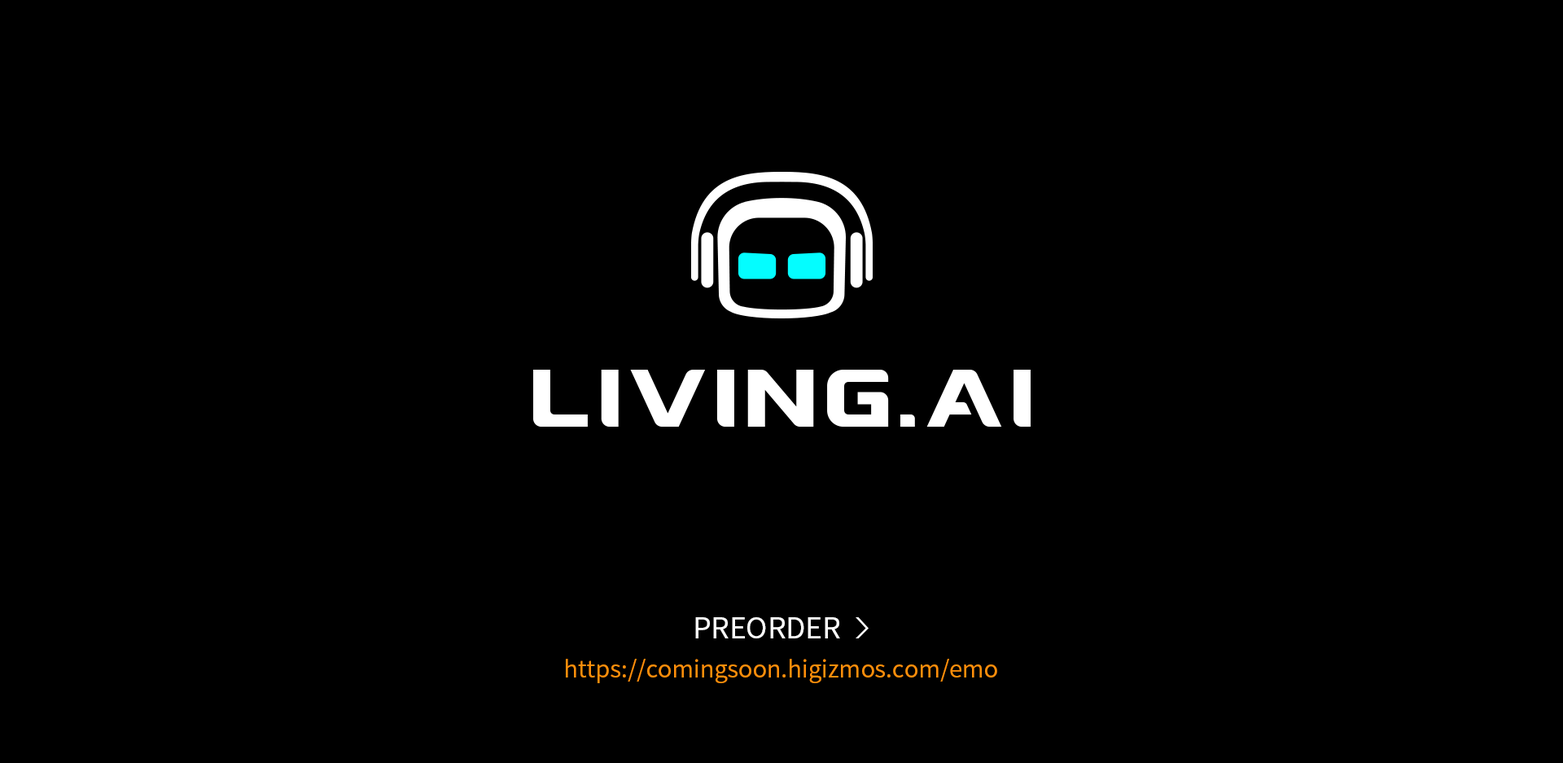
<style>
.page{position:relative;width:1563px;height:763px;background:#000000}
.page>*{position:absolute;margin:0}
.t1{font:28.8px "SourceHanSansCN-Regular";color:#fefefe;text-transform:uppercase}
.t2{font:23.4px "SourceHanSansCN-Regular";color:#ff8f0b}
</style>
<div class="page">
<p class="t1" style="left:695px;top:617px;width:145px;height:21px">Preorder</p>
<p class="t2" style="left:566px;top:659px;width:431px;height:24px">https://comingsoon.higizmos.com/emo</p>
</div>
